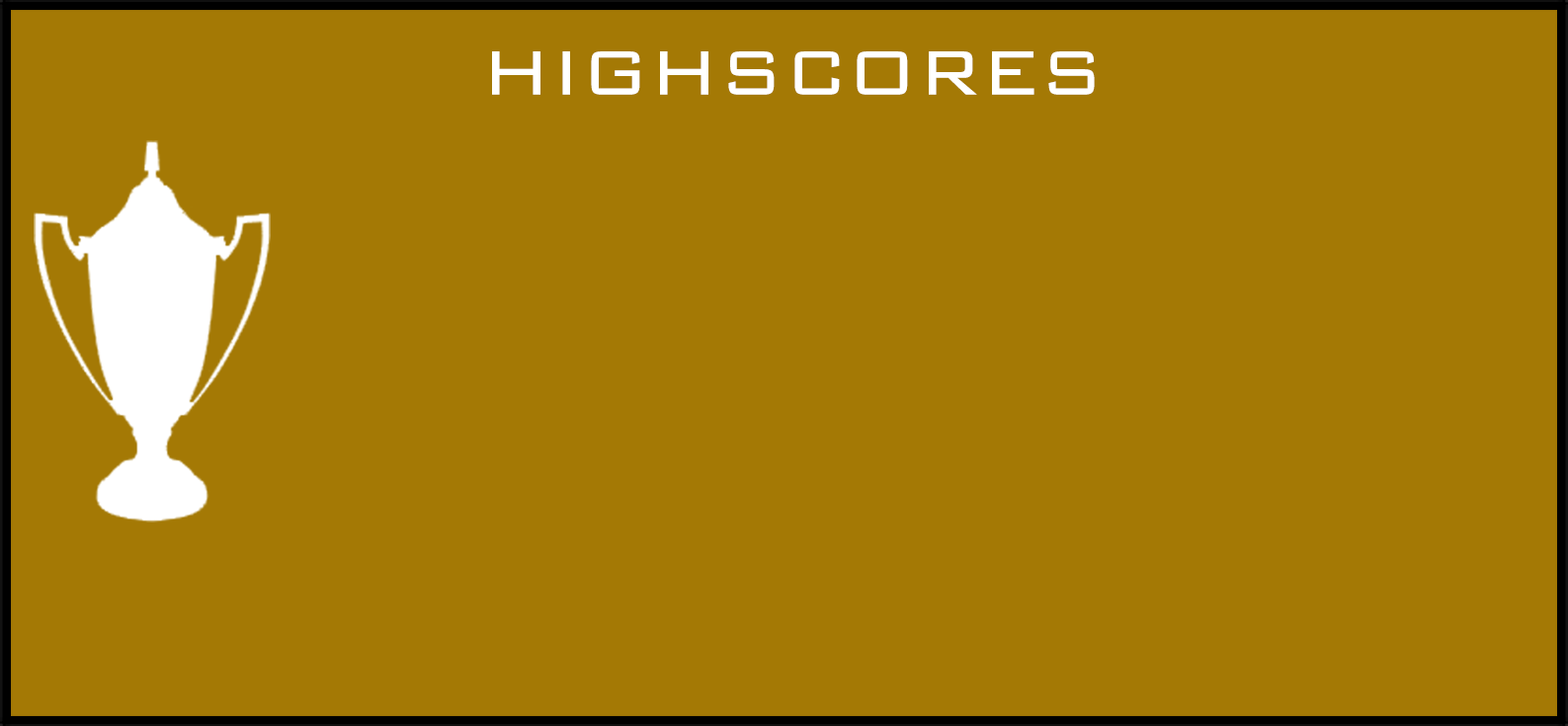
<style>
.page{position:relative;width:1568px;height:726px;background:#a47905}
.page>*{position:absolute;margin:0}
.t1{font:83.2px "BankGothic-Light";color:#ffffff}
</style>
<div class="page">
<p class="t1" style="left:492px;top:51px;width:603px;height:44px">HIGHSCORES</p>
</div>
